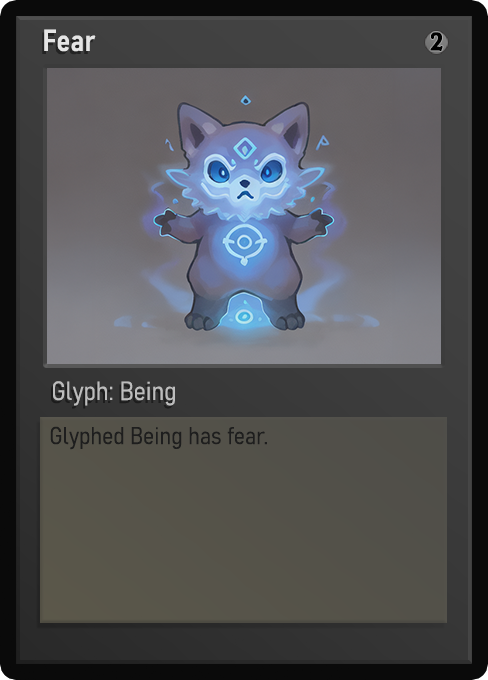
<style>
.page{position:relative;width:488px;height:680px}
.page>*{position:absolute;margin:0}
.t1{font:30px "Bahnschrift-SemiBoldSemiCondensed";color:#f2f2f2;font-weight:bold}
.t2{font:25px "WTRRoycroft";color:#000000;font-weight:bold;scale:1.09 1}
.t3{font:26px "Bahnschrift-LightSemiCondensed";color:#c8c8c8;font-weight:bold}
.t4{font:24px "Bahnschrift-LightSemiCondensed";color:#1e1e1e;font-weight:bold}
</style>
<div class="page">
<p class="t1" style="left:44px;top:29px;width:52px;height:23px;opacity:0.9">Fear</p>
<p class="t2" style="left:430px;top:32px;width:13px;height:19px">2</p>
<p class="t3" style="left:53px;top:381px;width:122px;height:25px;opacity:0.9">Glyph: Being</p>
<p class="t4" style="left:50px;top:426px;width:217px;height:24px">Glyphed Being has fear.</p>
</div>
